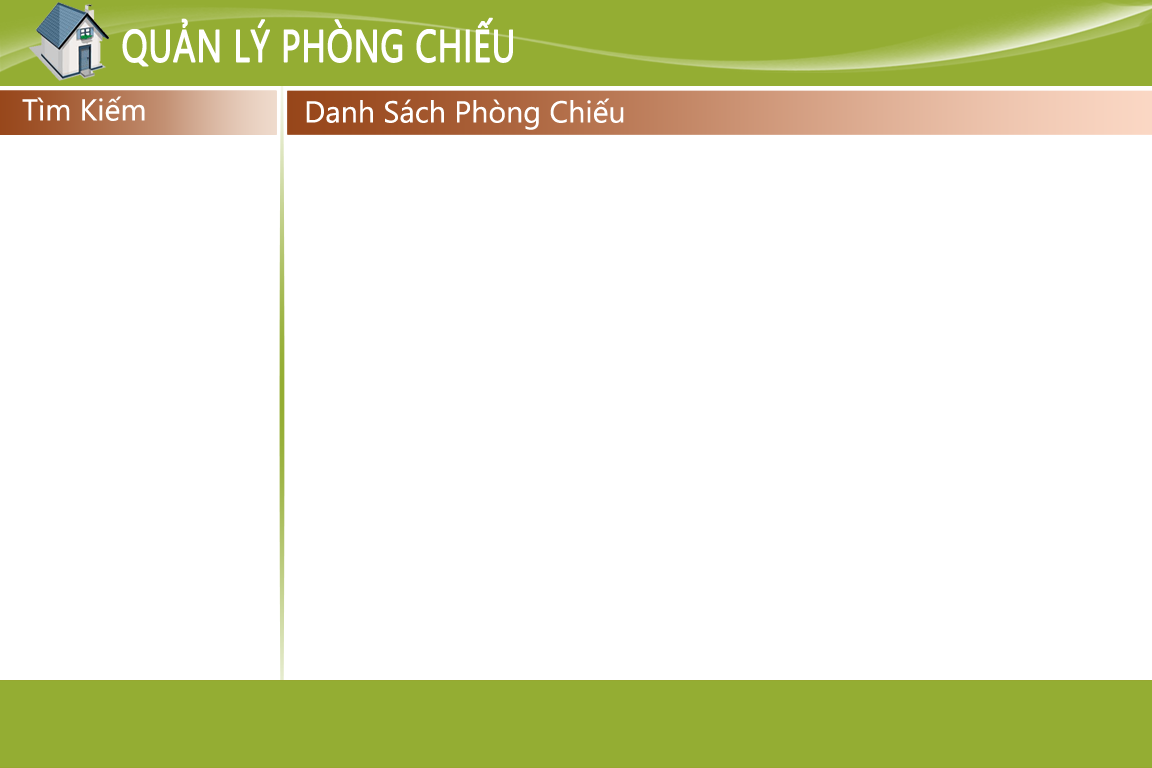
<style>
.page{position:relative;width:1152px;height:768px;background:#ffffff}
.page>*{position:absolute;margin:0}
.t1{font:45px "SegoeUI";color:#ffffff;text-transform:uppercase;font-weight:bold;scale:0.77 1}
.t2{font:30.3px "SegoeUI";color:#ffffff}
</style>
<div class="page">
<p class="t1" style="left:122px;top:17px;width:391px;height:50px">QUẢN LÝ PHÒNG CHIẾU</p>
<p class="t2" style="left:22px;top:96px;width:123px;height:25px">Tìm Kiếm</p>
<p class="t2" style="left:306px;top:98px;width:318px;height:32px">Danh Sách Phòng Chiếu</p>
</div>
